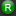
<style>
.page{position:relative;width:16px;height:16px}
.page>*{position:absolute;margin:0}
.t1{font:9px "DokChampa";color:#ffffff}
</style>
<div class="page">
<p class="t1" style="left:5px;top:4px;width:7px;height:7px">R</p>
</div>
